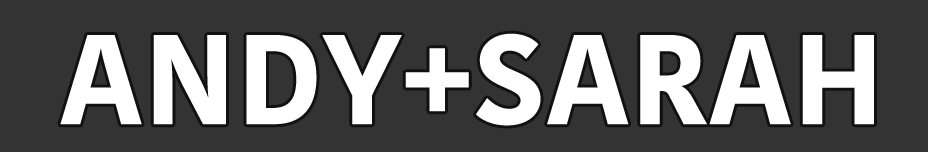
<style>
.page{position:relative;width:928px;height:152px;background:#333333}
.page>*{position:absolute;margin:0}
.t1{font:127px "KohinoorDevanagari-Bold";color:#ffffff}
</style>
<div class="page">
<p class="t1" style="left:60px;top:33px;width:814px;height:93px">ANDY+SARAH</p>
</div>
